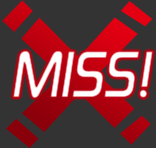
<style>
.page{position:relative;width:156px;height:148px;background:#333333}
.page>*{position:absolute;margin:0}
.t1{font:68.7px "DigitalEF-MediumItalic";color:#ffffff;scale:0.95 1}
</style>
<div class="page">
<p class="t1" style="left:13px;top:51px;width:140px;height:47px">MISS!</p>
<p class="t1" style="left:13px;top:50px;width:140px;height:48px">MISS!</p>
</div>
